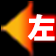
<style>
.page{position:relative;width:56px;height:56px;background:#000000}
.page>*{position:absolute;margin:0}
.t1{font:28px "KozGoPr6N-Heavy";color:#ffffff}
</style>
<div class="page">
<p class="t1" style="left:27px;top:14px;width:28px;height:27px">左</p>
</div>
